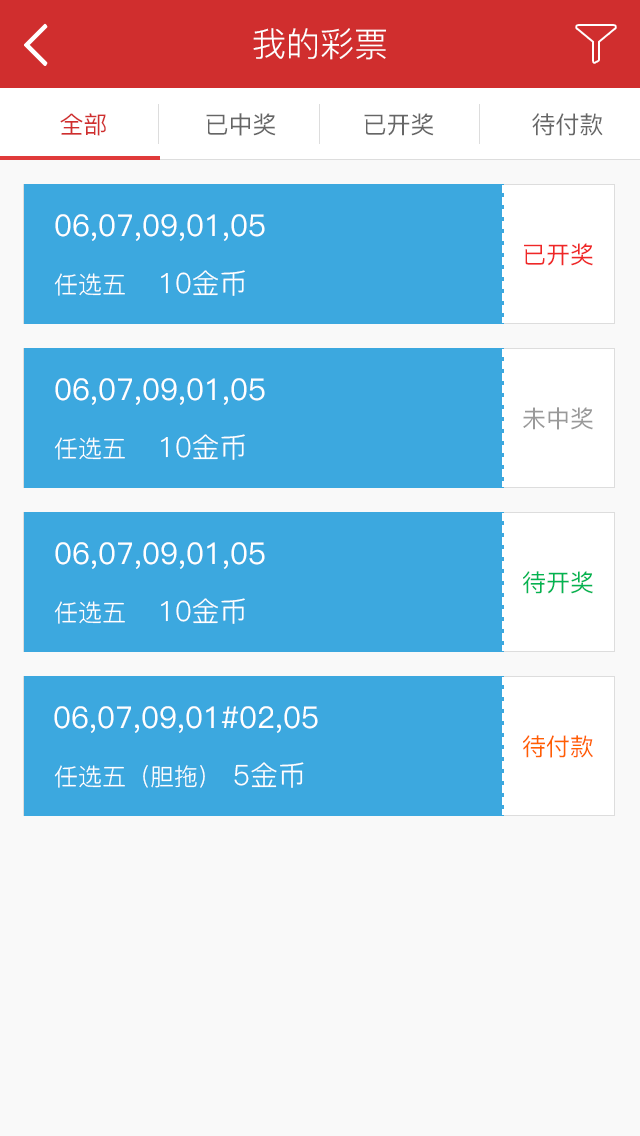
<style>
.page{position:relative;width:640px;height:1136px;background:#f9f9f9}
.page>*{position:absolute;margin:0}
.t1{font:34px "PingFang-SC-Regular";color:#ffffff}
.t2{font:24px "PingFang-SC-Medium";color:#d02e2e}
.t3{font:24px "PingFang-SC-Medium";color:#666666}
.t4{font:30px "PingFang-SC-Medium";color:#ffffff}
.t5{font:24px "PingFang-SC-Medium";color:#ef2727}
.t6{font:28px "PingFang-SC-Regular";color:#ffffff}
.t7{font:24px "PingFang-SC-Regular";color:#ffffff}
.t8{font:24px "PingFang-SC-Medium";color:#999999}
.t9{font:24px "PingFang-SC-Medium";color:#02b452}
.t10{font:24px "PingFang-SC-Medium";color:#ff6000}
</style>
<div class="page">
<p class="t1" style="left:253px;top:28px;width:133px;height:32px">我的彩票</p>
<p class="t2" style="left:60px;top:113px;width:46px;height:23px">全部</p>
<p class="t3" style="left:206px;top:113px;width:70px;height:23px">已中奖</p>
<p class="t3" style="left:364px;top:113px;width:70px;height:23px">已开奖</p>
<p class="t3" style="left:532px;top:113px;width:71px;height:23px">待付款</p>
<p class="t4" style="left:55px;top:214px;width:210px;height:27px">06,07,09,01,05</p>
<p class="t5" style="left:524px;top:243px;width:69px;height:23px">已开奖</p>
<p class="t6" style="left:161px;top:270px;width:84px;height:26px">10金币</p>
<p class="t7" style="left:54px;top:273px;width:71px;height:23px">任选五</p>
<p class="t4" style="left:55px;top:378px;width:210px;height:27px">06,07,09,01,05</p>
<p class="t8" style="left:523px;top:407px;width:70px;height:23px">未中奖</p>
<p class="t7" style="left:54px;top:437px;width:71px;height:23px">任选五</p>
<p class="t6" style="left:161px;top:434px;width:84px;height:26px">10金币</p>
<p class="t4" style="left:55px;top:542px;width:210px;height:27px">06,07,09,01,05</p>
<p class="t9" style="left:523px;top:571px;width:70px;height:23px">待开奖</p>
<p class="t7" style="left:54px;top:601px;width:71px;height:23px">任选五</p>
<p class="t6" style="left:161px;top:598px;width:84px;height:26px">10金币</p>
<p class="t4" style="left:54px;top:706px;width:264px;height:27px">06,07,09,01#02,05</p>
<p class="t10" style="left:523px;top:735px;width:70px;height:23px">待付款</p>
<p class="t7" style="left:54px;top:765px;width:151px;height:23px">任选五（胆拖）</p>
<p class="t6" style="left:234px;top:762px;width:70px;height:26px">5金币</p>
</div>
